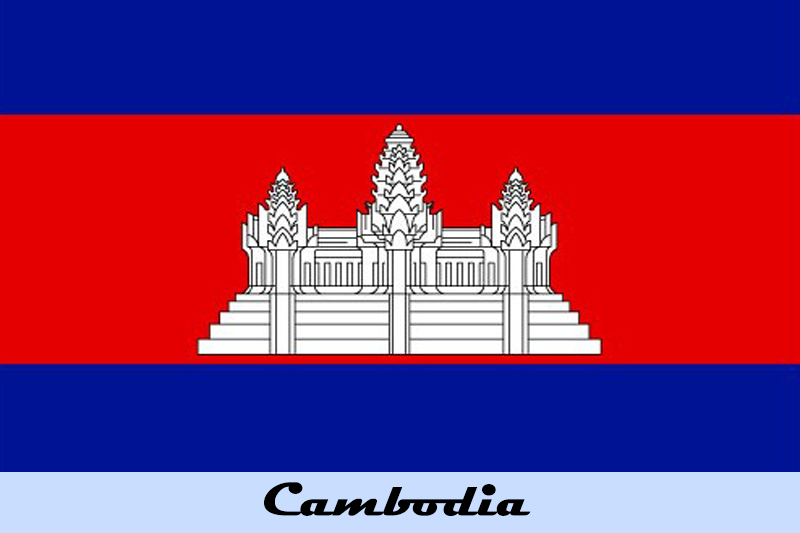
<style>
.page{position:relative;width:800px;height:533px;background:#001394}
.page>*{position:absolute;margin:0}
.t1{font:48px "Magneto-Bold";color:#000000;scale:1.08 1}
</style>
<div class="page">
<p class="t1" style="left:264px;top:482px;width:267px;height:34px">Cambodia</p>
</div>
